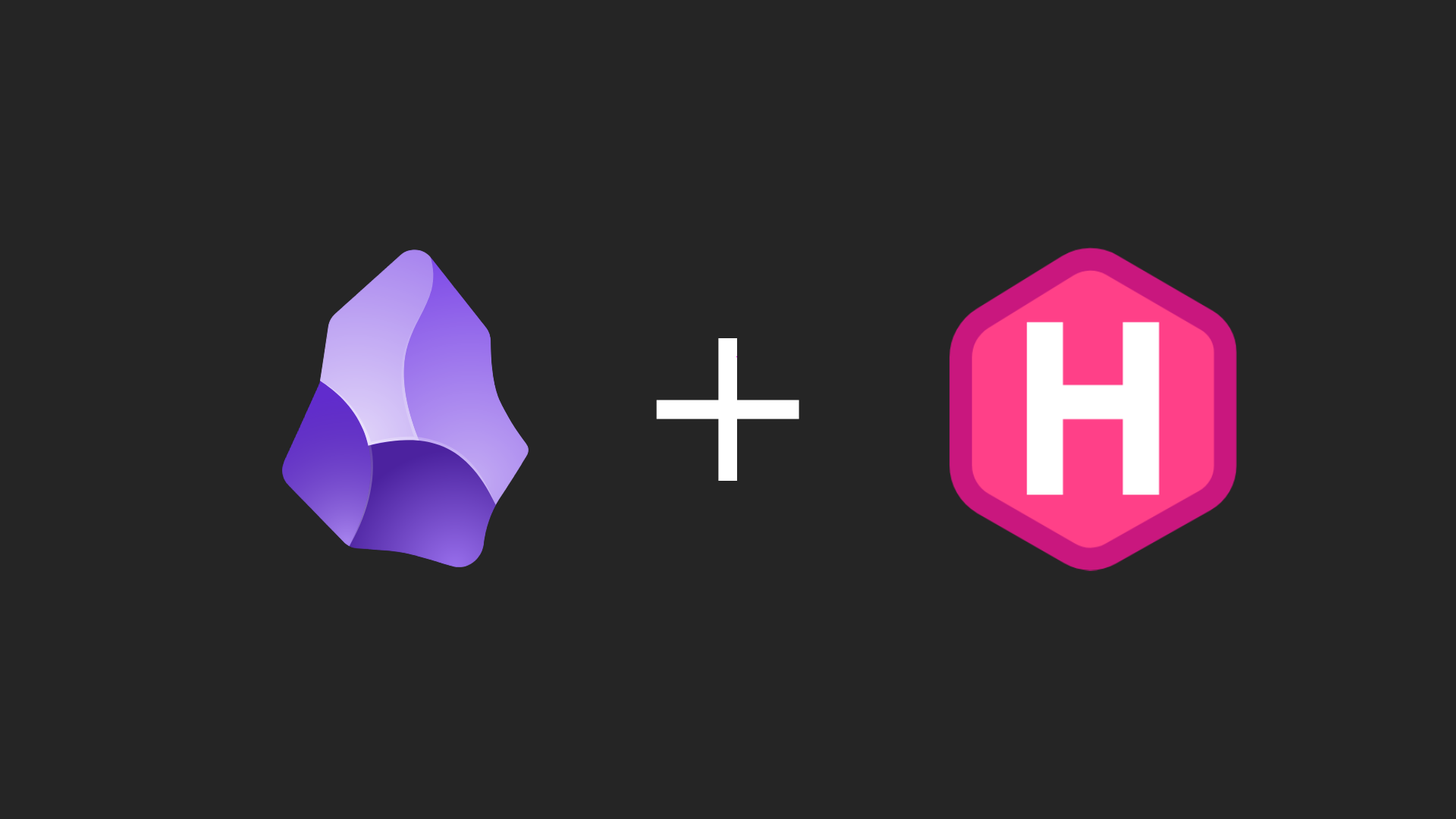
<style>
.page{position:relative;width:1456px;height:819px;background:#252525}
.page>*{position:absolute;margin:0}
.t1{font:227.5px "DejaVuSans";color:#ffffff}
</style>
<div class="page">
<p class="t1" style="left:656px;top:337px;width:143px;height:144px">+</p>
</div>
